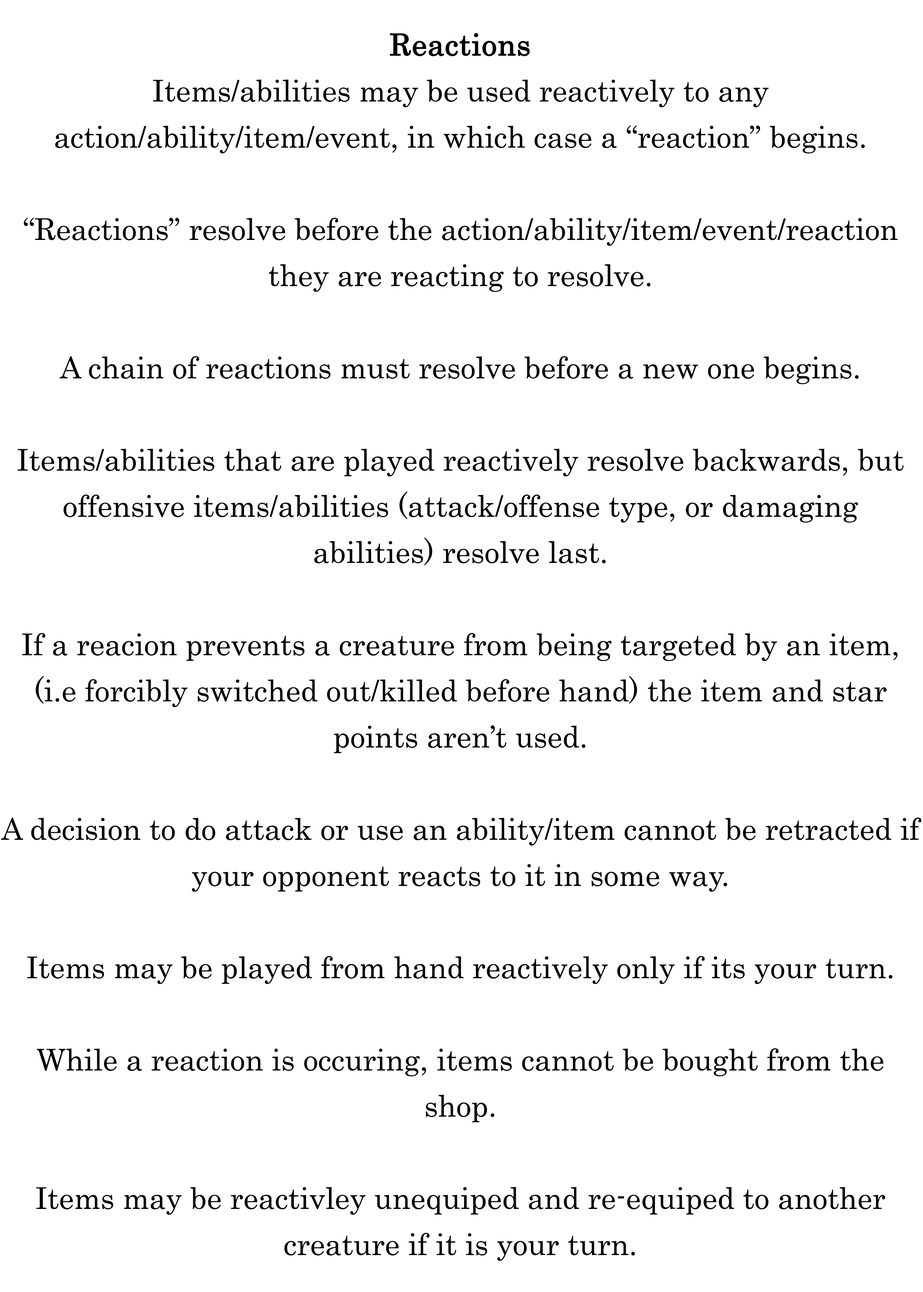
<style>
.page{position:relative;width:923px;height:1292px;background:#ffffff}
.page>*{position:absolute;margin:0}
.t1{font:51.3px/46.1px "Century";color:#000000}
.t2{font:51.3px/46.1px "Century";color:#000000;font-weight:bold}
</style>
<div class="page">
<p class="t1" style="left:1px;top:33px;width:920px;height:1228px;text-align:center"><span class="t2">Reactions</span><br>Items/abilities may be used reactively to any action/ability/item/event, in which case a “reaction” begins.<br><br>“Reactions” resolve before the action/ability/item/event/reaction they are reacting to resolve.<br><br>A chain of reactions must resolve before a new one begins.<br><br>Items/abilities that are played reactively resolve backwards, but offensive items/abilities (attack/offense type, or damaging abilities) resolve last.<br><br>If a reacion prevents a creature from being targeted by an item, (i.e forcibly switched out/killed before hand) the item and star points aren’t used.<br><br>A decision to do attack or use an ability/item cannot be retracted if your opponent reacts to it in some way.<br><br>Items may be played from hand reactively only if its your turn.<br><br>While a reaction is occuring, items cannot be bought from the shop.<br><br>Items may be reactivley unequiped and re-equiped to another creature if it is your turn.</p>
</div>
